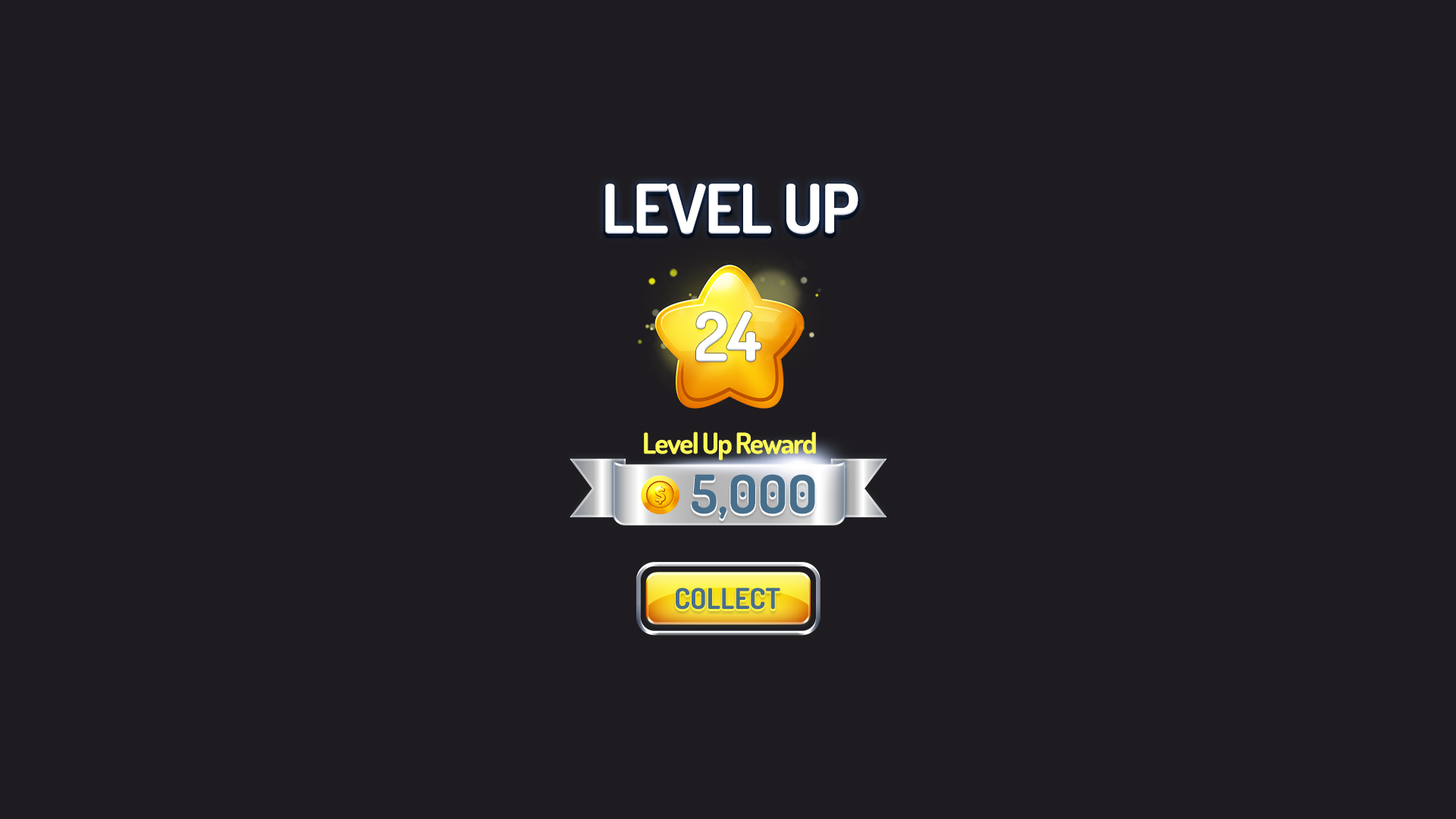
<style>
.page{position:relative;width:1456px;height:819px;background:#1e1c20}
.page>*{position:absolute;margin:0}
.t1{font:68.2px "Dosis-Bold";letter-spacing:-0.025em;color:#ffffff;text-transform:uppercase}
.t2{font:68.2px "Dosis-Bold";color:#ffffff;text-transform:uppercase}
.t3{font:28.8px "Dosis-Bold";letter-spacing:-0.05em;color:#fef859}
.t4{font:53.1px "Dosis-Bold";color:#476f8b;text-transform:uppercase}
.t5{font:28.8px "Dosis-Bold";color:#476f8b;text-transform:uppercase}
</style>
<div class="page">
<p class="t1" style="left:605px;top:184px;width:253px;height:50px">Level up</p>
<p class="t2" style="left:696px;top:311px;width:65px;height:51px">24</p>
<p class="t3" style="left:644px;top:431px;width:172px;height:29px">Level Up Reward</p>
<p class="t4" style="left:692px;top:474px;width:123px;height:45px">5,000</p>
<p class="t5" style="left:676px;top:588px;width:104px;height:22px">collect</p>
</div>
